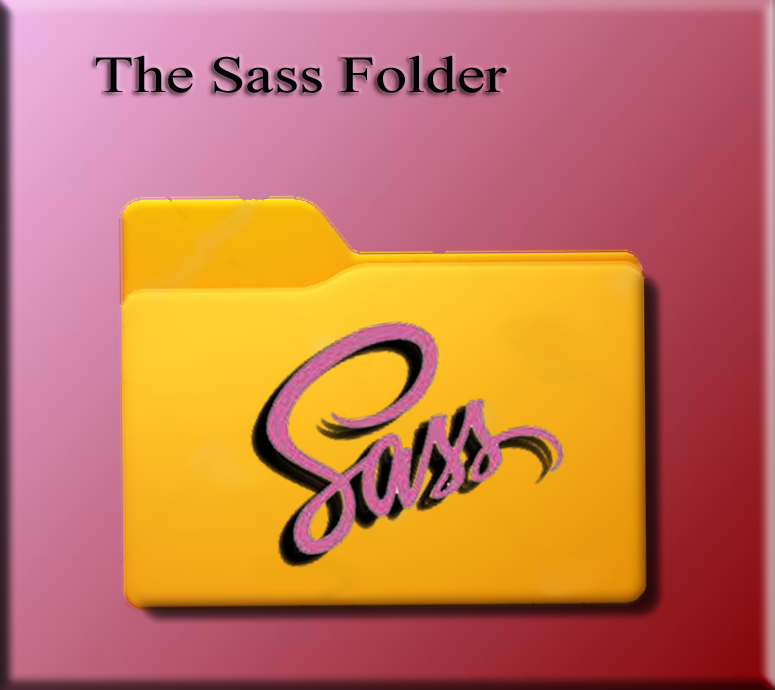
<style>
.page{position:relative;width:775px;height:690px}
.page>*{position:absolute;margin:0}
.t1{font:52px "TimesNewRomanPSMT";color:#020202;scale:1.23 1}
</style>
<div class="page">
<p class="t1" style="left:95px;top:55px;width:412px;height:38px">The Sass Folder</p>
</div>
